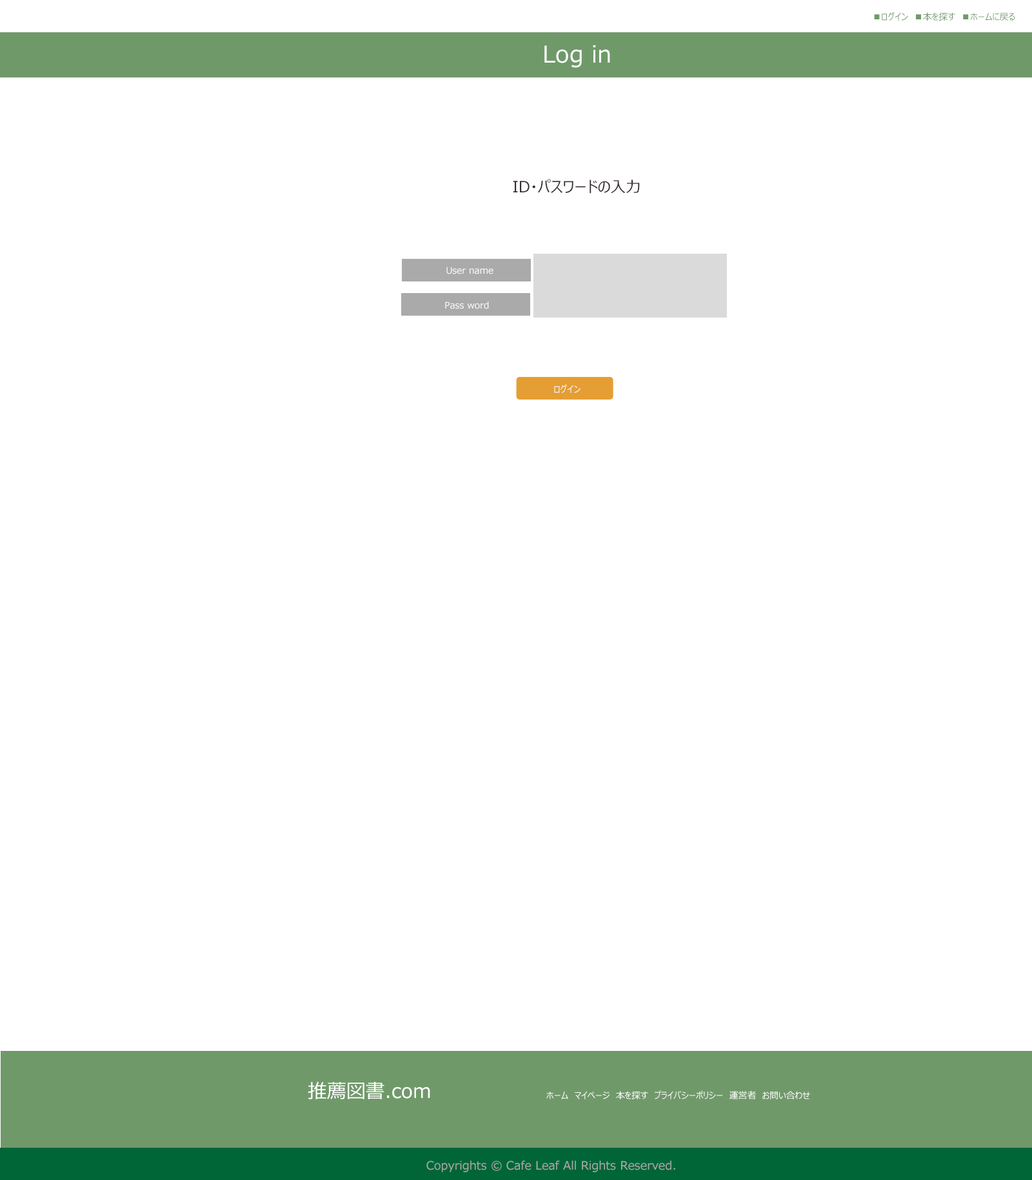
<style>
.page{position:relative;width:1032px;height:1180px;background:#ffffff}
.page>*{position:absolute;margin:0}
.t1{font:9px "MeiryoUI";color:#70996a}
.t2{font:23.1px "MeiryoUI";color:#ffffff}
.t3{font:15.4px "MeiryoUI";color:#362f2d}
.t4{font:9px "MeiryoUI";color:#ffffff}
.t5{font:19.3px "MeiryoUI";color:#ffffff}
.t6{font:11.6px "MeiryoUI";color:#aaaaaa}
</style>
<div class="page">
<p class="t1" style="left:874px;top:12px;width:142px;height:9px">■ログイン　■本を探す　■ホームに戻る</p>
<p class="t2" style="left:545px;top:45px;width:65px;height:23px">Log in</p>
<p class="t3" style="left:513px;top:179px;width:127px;height:15px">ID・パスワードの入力</p>
<p class="t4" style="left:447px;top:266px;width:47px;height:8px">User name</p>
<p class="t4" style="left:445px;top:301px;width:44px;height:8px">Pass word</p>
<p class="t4" style="left:554px;top:384px;width:27px;height:9px">ログイン</p>
<p class="t5" style="left:308px;top:1081px;width:122px;height:18px">推薦図書.com</p>
<p class="t4" style="left:547px;top:1090px;width:263px;height:9px">ホーム　マイページ　本を探す　プライバシーポリシー　運営者　お問い合わせ</p>
<p class="t6" style="left:427px;top:1160px;width:249px;height:12px">Copyrights © Cafe Leaf All Rights Reserved.</p>
</div>
